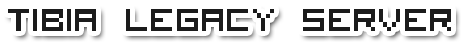
<style>
.page{position:relative;width:463px;height:43px;background:#ffffff}
.page>*{position:absolute;margin:0}
.t1{font:42.7px "VisitorTT1BRK";color:#1b1b1b}
</style>
<div class="page">
<p class="t1" style="left:8px;top:9px;width:443px;height:22px">Tibia Legacy Server</p>
</div>
